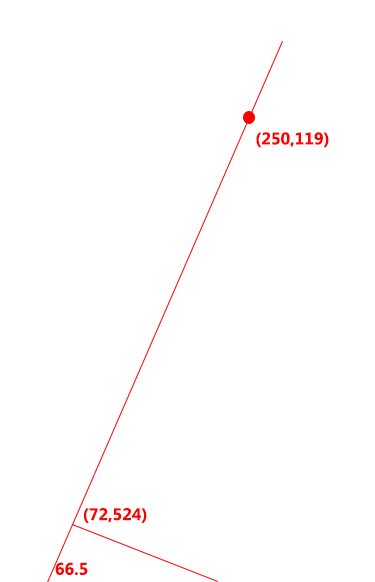
<style>
.page{position:relative;width:375px;height:582px;background:#ffffff}
.page>*{position:absolute;margin:0}
.t1{font:15.6px "MicrosoftYaHei-Bold";color:#ff0000}
</style>
<div class="page">
<p class="t1" style="left:256px;top:132px;width:73px;height:16px">(250,119)</p>
<p class="t1" style="left:83px;top:508px;width:64px;height:15px">(72,524)</p>
<p class="t1" style="left:55px;top:562px;width:33px;height:13px">66.5</p>
</div>
